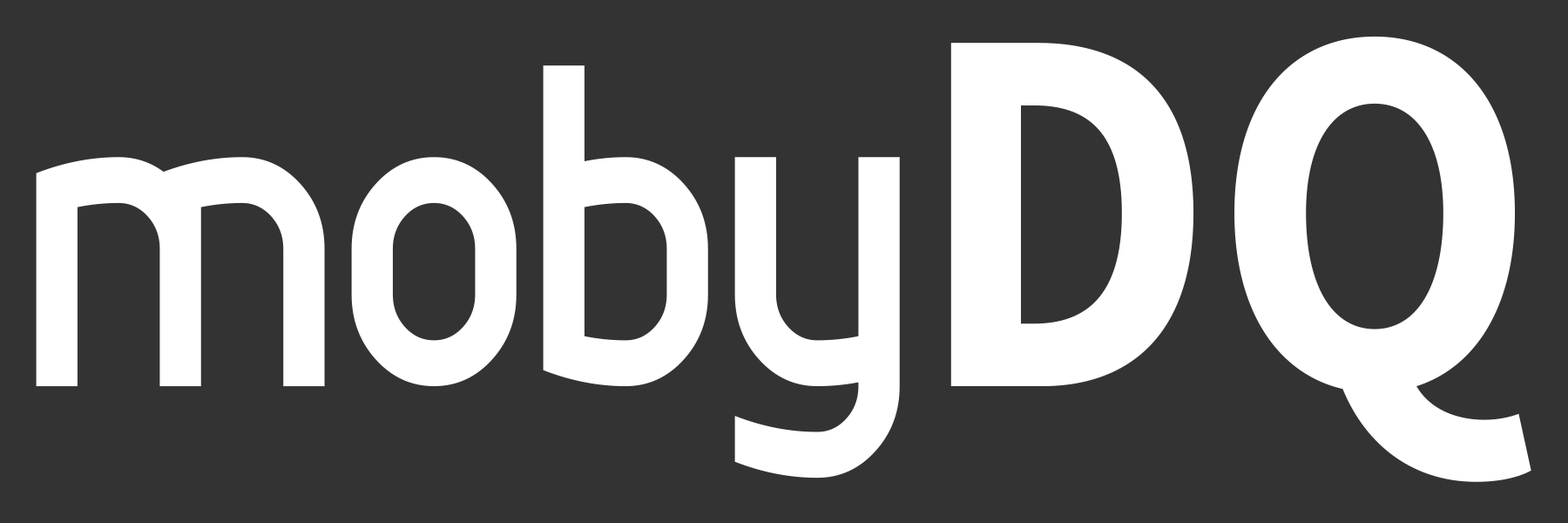
<style>
.page{position:relative;width:1568px;height:523px;background:#333333}
.page>*{position:absolute;margin:0}
.t1{font:468.2px "Bogotana";letter-spacing:0.005em;color:#ffffff;scale:0.9 1}
.t2{font:526.3px "SourceSansRoman-Bold";letter-spacing:-0.005em;color:#ffffff;font-weight:bold;scale:0.9 1}
</style>
<div class="page">
<p class="t1" style="left:36px;top:36px;width:1495px;height:446px">moby<span class="t2">DQ</span></p>
</div>
